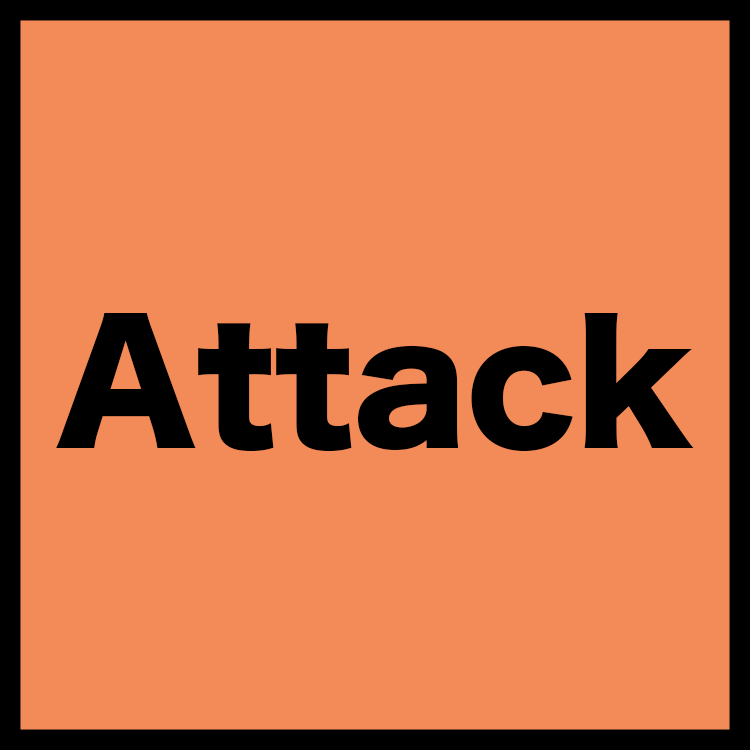
<style>
.page{position:relative;width:750px;height:750px;background:#f38b58}
.page>*{position:absolute;margin:0}
.t1{font:162.8px "HiraKakuStdN-W8";color:#000000}
</style>
<div class="page">
<p class="t1" style="left:56px;top:313px;width:638px;height:139px">Attack</p>
</div>
